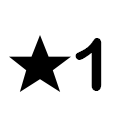
<style>
.page{position:relative;width:128px;height:128px;background:#ffffff}
.page>*{position:absolute;margin:0}
.t1{font:17.5px "ArialRoundedMTBold";letter-spacing:0.4em;color:#000000}
</style>
<div class="page">
<p class="t1" style="left:75px;top:38px;width:27px;height:53px;text-align:center">1</p>
</div>
